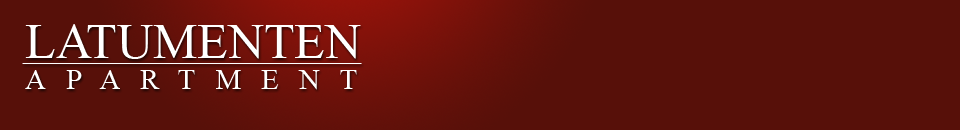
<style>
.page{position:relative;width:960px;height:130px;background:#571009}
.page>*{position:absolute;margin:0}
.t1{font:50px "TimesNewRomanPSMT";color:#ffffff}
.t2{font:29.2px "TimesNewRomanPSMT";letter-spacing:0.68em;color:#ffffff}
</style>
<div class="page">
<p class="t1" style="left:25px;top:24px;width:336px;height:35px">LATUMENTEN</p>
<p class="t2" style="left:25px;top:70px;width:332px;height:20px">APARTMENT</p>
</div>
